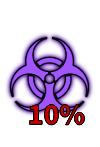
<style>
.page{position:relative;width:100px;height:147px;background:#ffffff}
.page>*{position:absolute;margin:0}
.t1{font:26px "SourceHanSansSC-Heavy"}
</style>
<div class="page">
<p class="t1" style="left:28px;top:103px;width:58px;height:23px">10%</p>
</div>
